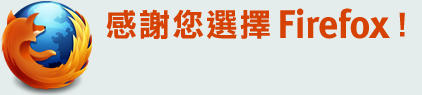
<style>
.page{position:relative;width:422px;height:95px;background:#e4ecec}
.page>*{position:absolute;margin:0}
.t1{font:40px "MetaBold-Roman";letter-spacing:-0.01em;color:#d64203}
.t2{font:32px "DFLiHeiStd-W7";letter-spacing:0.05em;color:#d64203}
.t3{font:32px "DFLiHeiStd-W7";color:#d64203}
</style>
<div class="page">
<p class="t1" style="left:106px;top:8px;width:299px;height:31px"><span class="t2">感謝您選擇 </span>Firefox<span class="t3">！</span></p>
</div>
